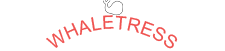
<style>
.page{position:relative;width:225px;height:51px;background:#ffffff}
.page>*{position:absolute;margin:0}
.t1{font:18.6px "ArialMT";color:#ef5350}
</style>
<div class="page">
<p class="t1" style="left:46px;top:15px;width:132px;height:34px">WHALETRESS</p>
</div>
